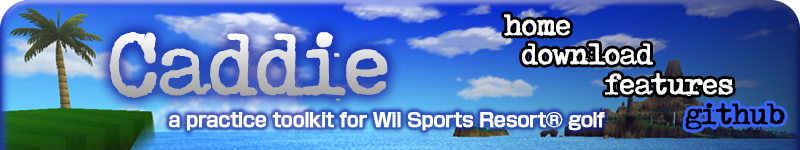
<style>
.page{position:relative;width:800px;height:150px}
.page>*{position:absolute;margin:0}
.t1{font:33.3px "ToxTypewriter";letter-spacing:-0.04em;color:#ffffff;font-weight:bold}
.t2{font:98.6px "ToxTypewriter";letter-spacing:-0.04em;font-weight:bold}
.t3{font:19.1px "ShinGoPro-DeBold";letter-spacing:-0.04em;color:#ffffff;font-weight:bold}
.t4{font:33.3px "ToxTypewriter";letter-spacing:-0.04em;color:#000000;font-weight:bold}
</style>
<div class="page">
<p class="t1" style="left:504px;top:14px;width:66px;height:22px">home</p>
<p class="t2" style="left:109px;top:32px;width:279px;height:69px">Caddie</p>
<p class="t1" style="left:522px;top:43px;width:131px;height:22px">download</p>
<p class="t1" style="left:605px;top:73px;width:128px;height:23px">features</p>
<p class="t3" style="left:169px;top:112px;width:436px;height:19px">a practice toolkit for Wii Sports Resort® golf</p>
<p class="t4" style="left:685px;top:103px;width:100px;height:27px">github</p>
</div>
